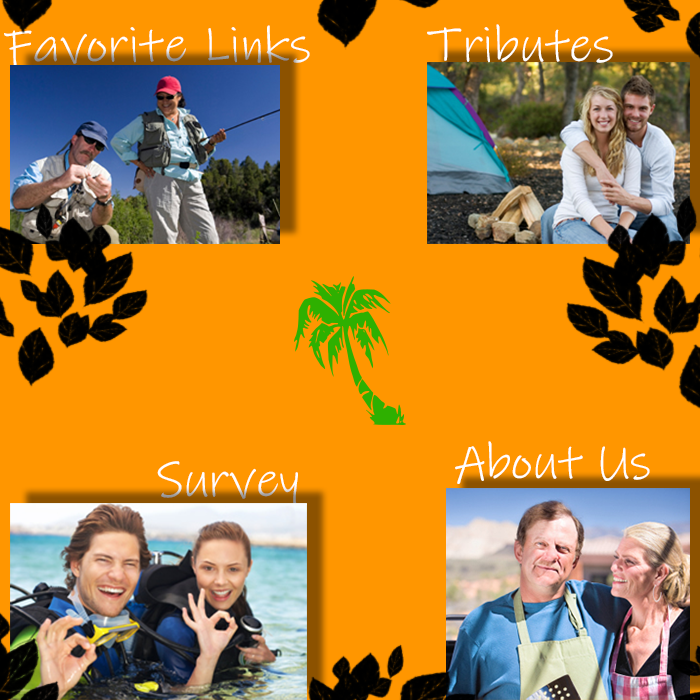
<style>
.page{position:relative;width:700px;height:700px;background:#ff9600}
.page>*{position:absolute;margin:0}
.t1{font:50px "InkFree";color:#ffffff}
</style>
<div class="page">
<p class="t1" style="left:4px;top:25px;width:306px;height:43px">Favorite Links</p>
<p class="t1" style="left:427px;top:24px;width:186px;height:39px">Tributes</p>
<p class="t1" style="left:455px;top:441px;width:195px;height:43px">About Us</p>
<p class="t1" style="left:157px;top:461px;width:141px;height:46px">Survey</p>
</div>
